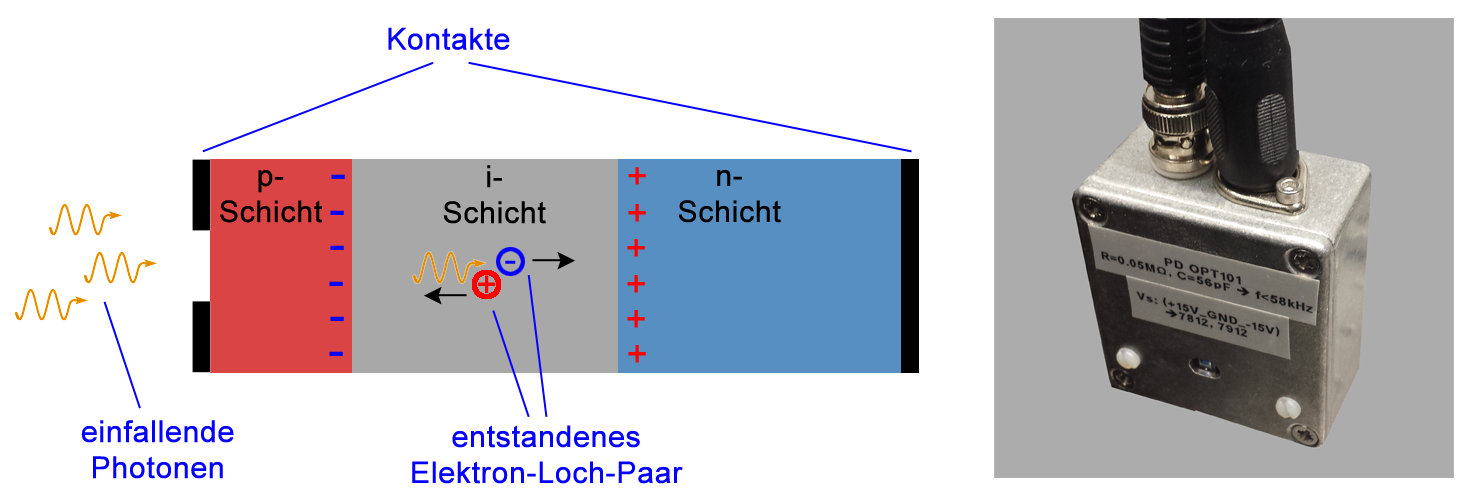
<style>
.page{position:relative;width:1471px;height:497px;background:#ffffff}
.page>*{position:absolute;margin:0}
.t1{font:30px "ArialMT";color:#0600ff;font-weight:bold}
.t2{font:30px "ArialMT";color:#000000;font-weight:bold}
.t3{font:48px "ArialMT";color:#0600ff;font-weight:bold}
.t4{font:36px "ArialMT";color:#ff0000;font-weight:bold}
</style>
<div class="page">
<p class="t1" style="left:388px;top:27px;width:122px;height:23px">Kontakte</p>
<p class="t2" style="left:220px;top:170px;width:103px;height:53px;text-align:center">p-<br>Schicht</p>
<p class="t3" style="left:331px;top:174px;width:14px;height:5px">-</p>
<p class="t2" style="left:443px;top:165px;width:103px;height:59px;text-align:center">i-<br>Schicht</p>
<p class="t4" style="left:628px;top:167px;width:18px;height:18px">+</p>
<p class="t2" style="left:678px;top:169px;width:103px;height:54px;text-align:center">n-<br>Schicht</p>
<p class="t4" style="left:478px;top:275px;width:18px;height:18px">+</p>
<p class="t1" style="left:81px;top:420px;width:153px;height:59px;text-align:center">einfallende<br>Photonen</p>
<p class="t1" style="left:412px;top:425px;width:271px;height:59px;text-align:center">entstandenes<br>Elektron-Loch-Paar</p>
</div>
